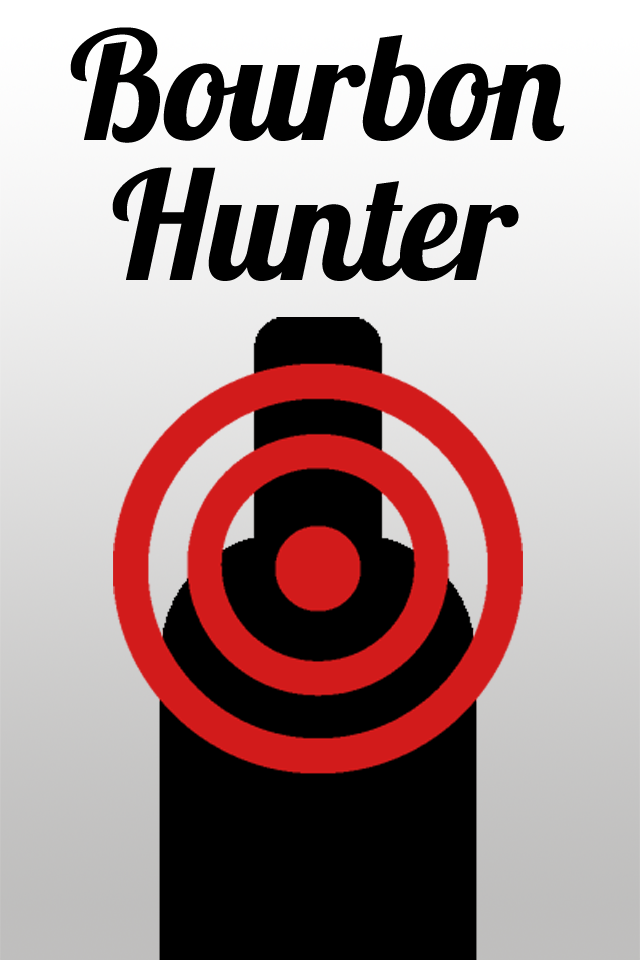
<style>
.page{position:relative;width:640px;height:960px;background:#000000}
.page>*{position:absolute;margin:0}
.t1{font:150px "Lobster-Regular";color:#000000}
</style>
<div class="page">
<p class="t1" style="left:70px;top:27px;width:495px;height:116px">Bourbon</p>
<p class="t1" style="left:112px;top:167px;width:407px;height:114px">Hunter</p>
</div>
